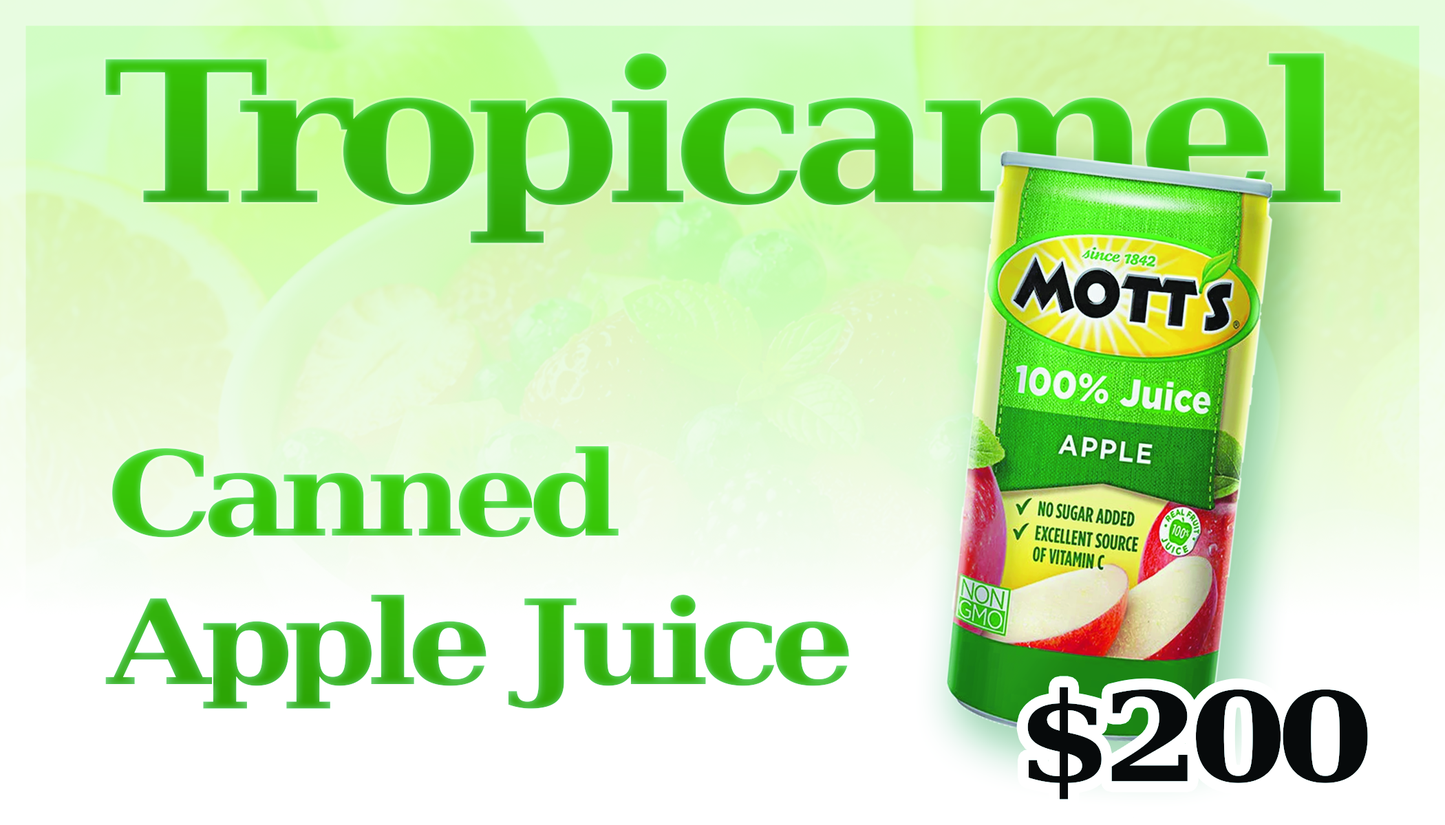
<style>
.page{position:relative;width:1445px;height:825px}
.page>*{position:absolute;margin:0}
.t1{font:196px "DejaVuSerifCondensed-Bold";letter-spacing:-0.069em;scale:1.26 1}
.t2{font:117.6px "DejaVuSerifCondensed-Bold";letter-spacing:-0.069em;scale:1.26 1}
.t3{font:123.7px "DejaVuSerifCondensed-Bold";letter-spacing:-0.069em;color:#000000;scale:1.26 1}
</style>
<div class="page">
<p class="t1" style="left:105px;top:53px;width:1236px;height:191px">Tropicamel</p>
<p class="t2" style="left:105px;top:446px;width:745px;height:264px">Canned<br>Apple Juice</p>
<p class="t3" style="left:1026px;top:687px;width:342px;height:114px">$200</p>
</div>
